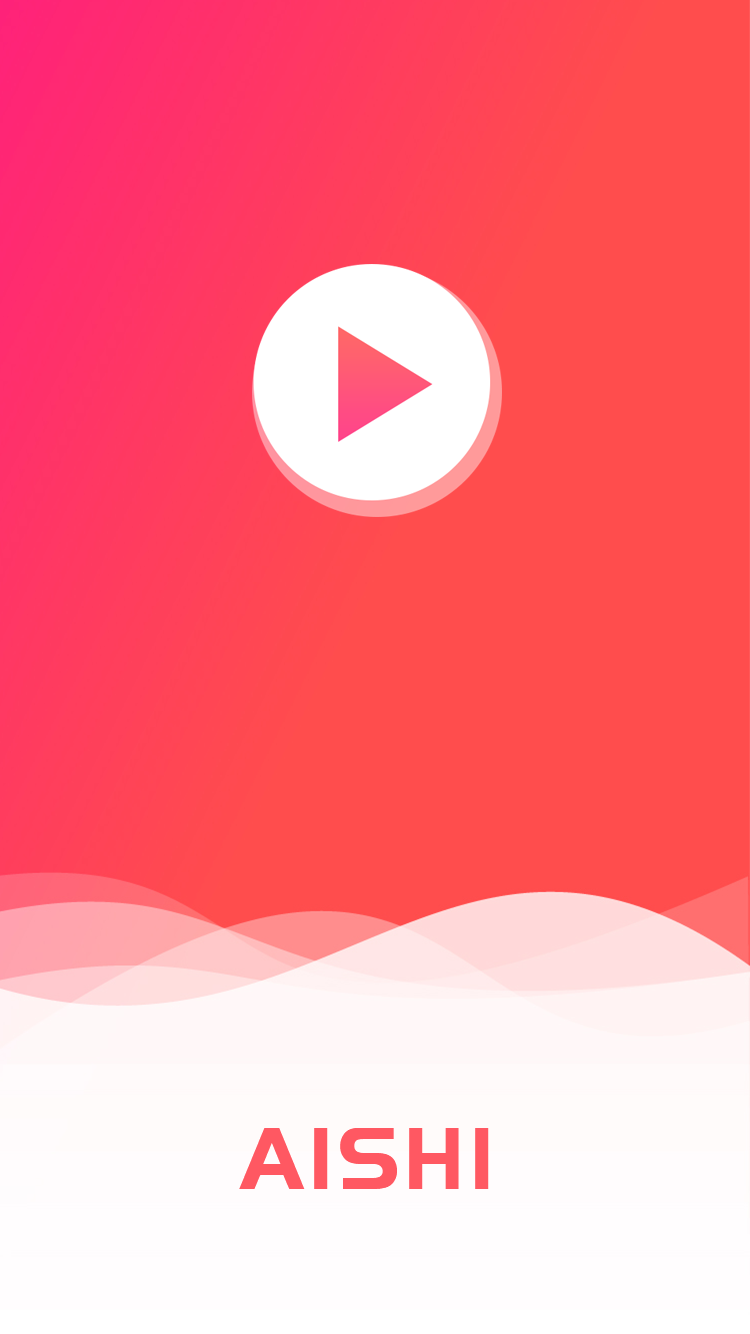
<style>
.page{position:relative;width:750px;height:1334px;background:#ff4d4d}
.page>*{position:absolute;margin:0}
.t1{font:90.7px "PangMenZhengDao";letter-spacing:0.04em;color:#ff5862}
</style>
<div class="page">
<p class="t1" style="left:239px;top:1128px;width:250px;height:61px">AISHI</p>
</div>
